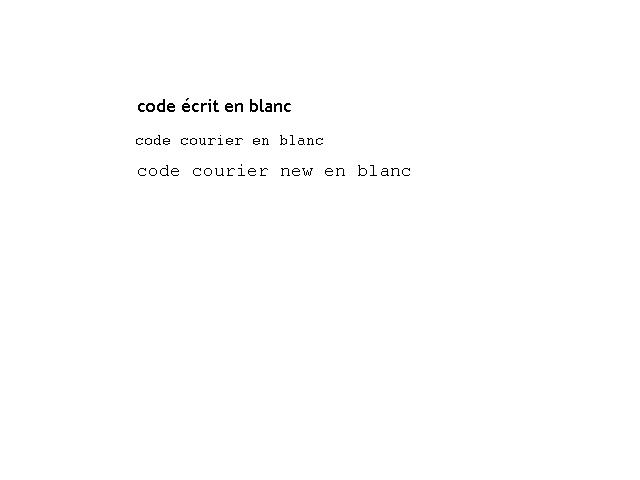
<style>
.page{position:relative;width:640px;height:480px;background:#ffffff}
.page>*{position:absolute;margin:0}
.t1{font:18px "TrebuchetMS";color:#000000}
.t2{font:18px "Courier";color:#000000}
.t3{font:18px "CourierNewPSMT";color:#000000}
</style>
<div class="page">
<p class="t1" style="left:138px;top:98px;width:153px;height:14px">code écrit en blanc</p>
<p class="t2" style="left:136px;top:135px;width:187px;height:10px">code courier en blanc</p>
<p class="t3" style="left:138px;top:164px;width:272px;height:12px">code courier new en blanc</p>
</div>
